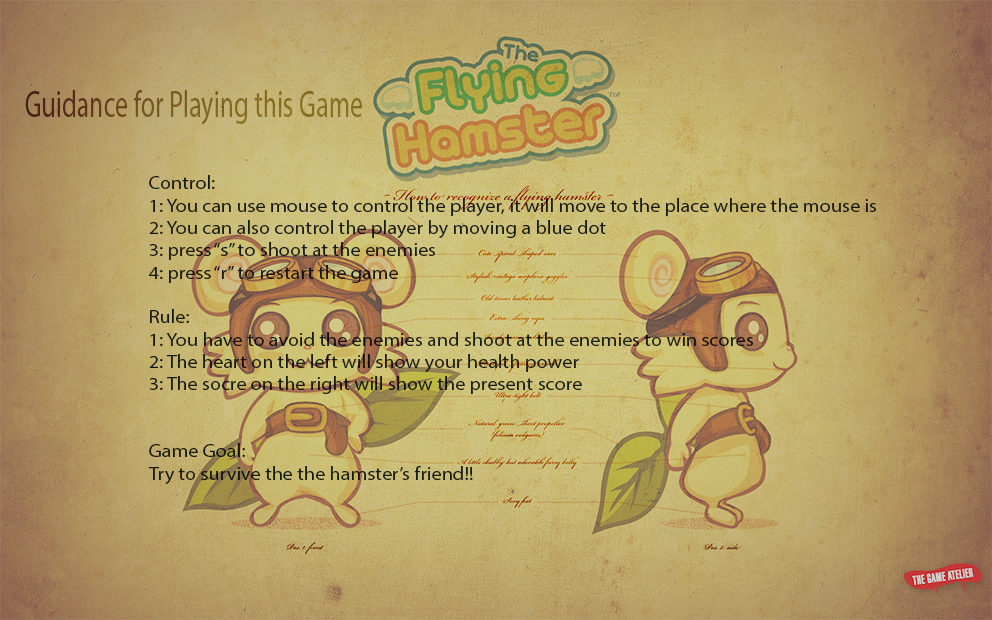
<style>
.page{position:relative;width:992px;height:620px}
.page>*{position:absolute;margin:0}
.t1{font:37.7px "MyriadPro-Regular";scale:0.69 1}
.t2{font:18.6px "MyriadPro-Regular";color:#1b2526;scale:1.09 1}
</style>
<div class="page">
<p class="t1" style="left:25px;top:90px;width:337px;height:35px">Guidance for Playing this Game</p>
<p class="t2" style="left:149px;top:175px;width:727px;height:310px">Control:<br>1: You can use mouse to control the player, it will move to the place where the mouse is<br>2: You can also control the player by moving a blue dot<br>3: press “s” to shoot at the enemies<br>4: press “r” to restart the game<br><br>Rule:<br>1: You have to avoid the enemies and shoot at the enemies to win scores<br>2: The heart on the left will show your health power <br>3: The socre on the right will show the present score<br><br><br>Game Goal:<br>Try to survive the the hamster’s friend!!</p>
</div>
